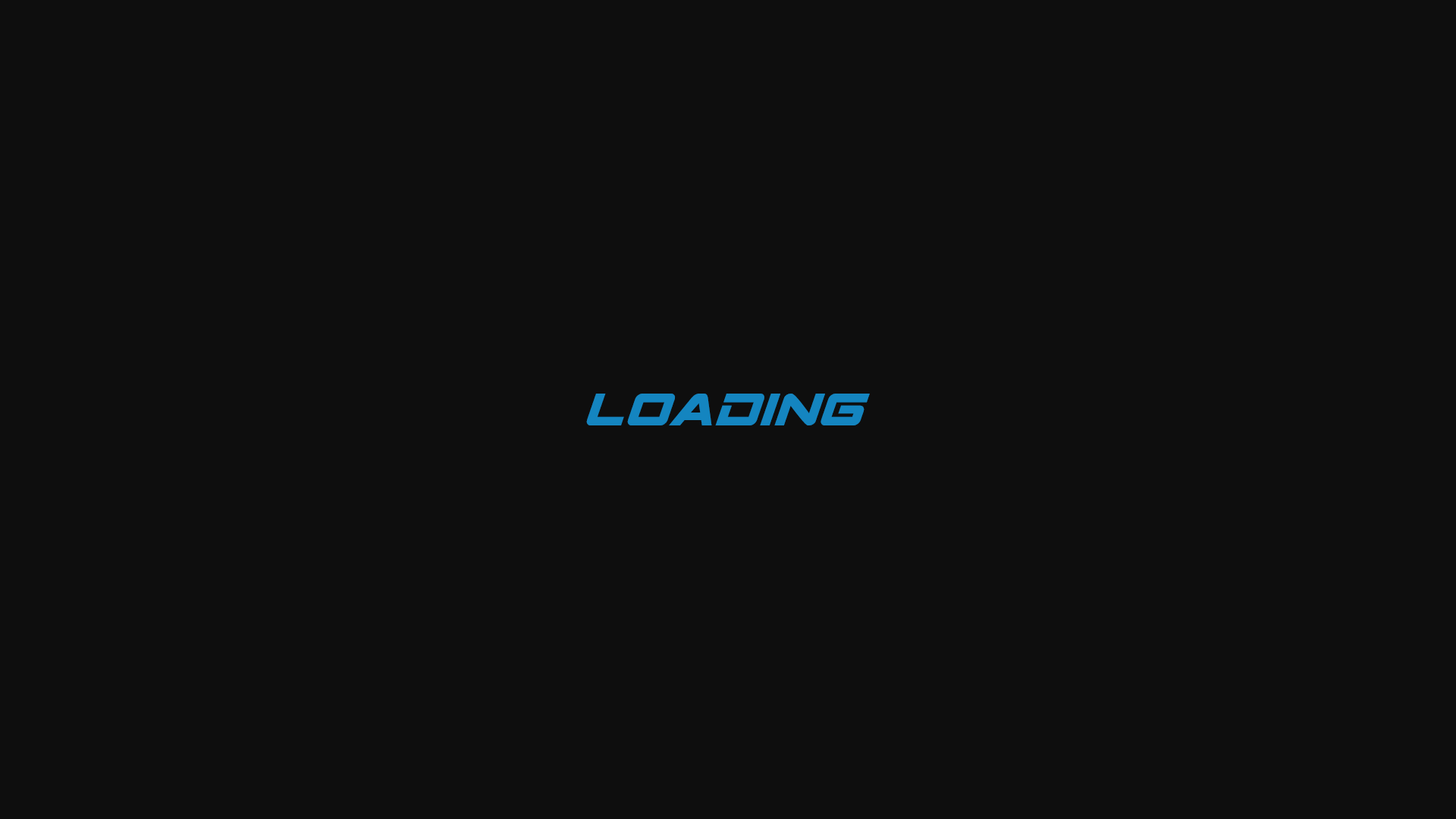
<style>
.page{position:relative;width:1456px;height:819px;background:#0e0e0e}
.page>*{position:absolute;margin:0}
.t1{font:63.2px "SpaceRangerItalic";letter-spacing:0.02em;color:#1485c0}
</style>
<div class="page">
<p class="t1" style="left:586px;top:394px;width:284px;height:31px">Loading</p>
</div>
